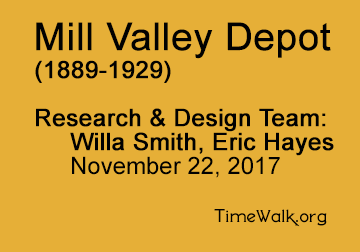
<style>
.page{position:relative;width:360px;height:252px;background:#e6af37}
.page>*{position:absolute;margin:0}
.t1{font:24px/24px "ArialMT";color:#010101;font-weight:bold}
.t2{font:38px/36px "ArialMT";color:#010101;font-weight:bold}
.t3{font:24px/28px "ArialMT";color:#010101;font-weight:bold}
.t4{font:24px/24px "ArialMT";color:#010101}
.t5{font:18px/24px "ArialMT";color:#010101}
.t6{font:18px/24px "SilentinaFilm";color:#010101}
</style>
<div class="page">
<p class="t1" style="left:35px;top:22px;width:299px;height:205px"><span class="t2">Mill Valley Depot<br></span><span class="t3">(1889-1929)<br></span><br>Research &amp; Design Team:<br> Willa Smith, Eric Hayes<br><span class="t4"> November 22, 2017<br> <br></span><span class="t5">     T</span><span class="t6">imeWalk.org</span></p>
</div>
